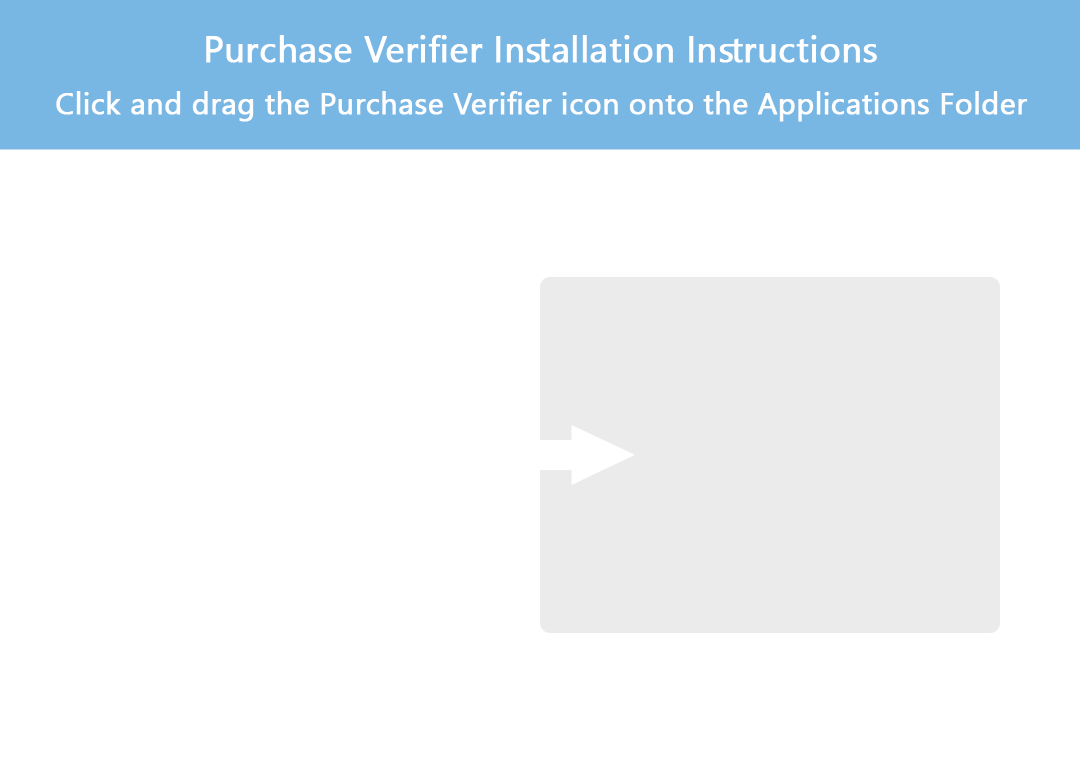
<style>
.page{position:relative;width:1080px;height:760px;background:#ffffff}
.page>*{position:absolute;margin:0}
.t1{font:36px "SegoeUI";color:#ffffff;font-weight:bold}
.t2{font:30px "SegoeUI";color:#fefefe;font-weight:bold}
</style>
<div class="page">
<p class="t1" style="left:206px;top:35px;width:671px;height:28px">Purchase Verifier Installation Instructions</p>
<p class="t2" style="left:56px;top:91px;width:972px;height:31px">Click and drag the Purchase Verifier icon onto the Applications Folder</p>
</div>
